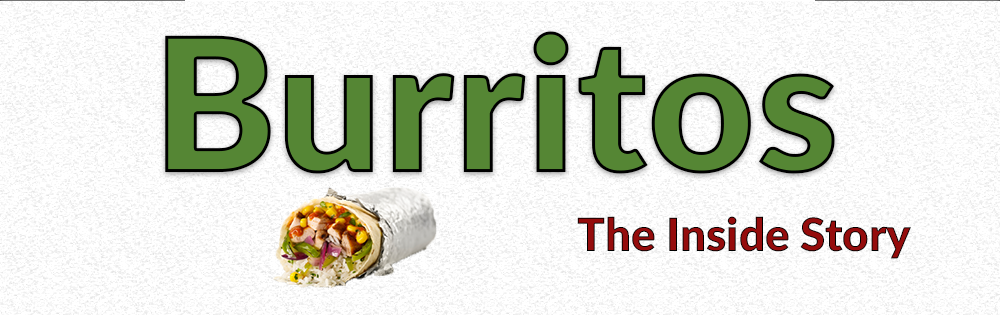
<style>
.page{position:relative;width:1000px;height:315px;background:#ffffff}
.page>*{position:absolute;margin:0}
.t1{font:187.5px "Lato-Black";color:#558634}
.t2{font:45.8px "Lato-Black";color:#950c0c}
</style>
<div class="page">
<p class="t1" style="left:165px;top:31px;width:670px;height:143px">Burritos</p>
<p class="t2" style="left:577px;top:216px;width:334px;height:43px">The Inside Story</p>
</div>
